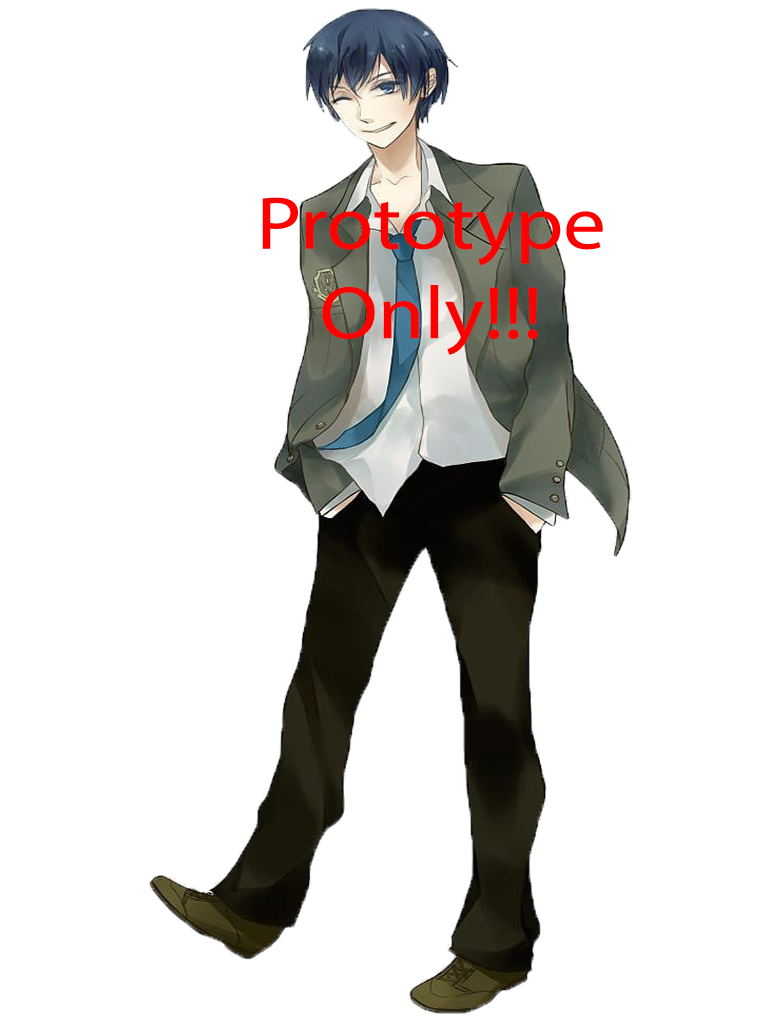
<style>
.page{position:relative;width:768px;height:1024px;background:#ffffff}
.page>*{position:absolute;margin:0}
.t1{font:74.7px "MyriadPro-Regular";color:#ff0000;scale:1.13 1}
</style>
<div class="page">
<p class="t1" style="left:262px;top:197px;width:341px;height:158px;text-align:center">Prototype Only!!!</p>
</div>
